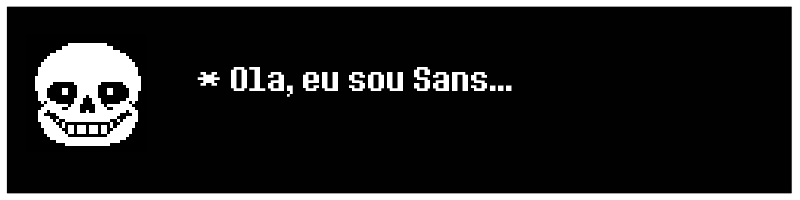
<style>
.page{position:relative;width:800px;height:200px;background:#010101}
.page>*{position:absolute;margin:0}
.t1{font:36px "DeterminationSans";color:#ffffff}
</style>
<div class="page">
<p class="t1" style="left:197px;top:67px;width:315px;height:30px">* Ola, eu sou Sans...</p>
</div>
